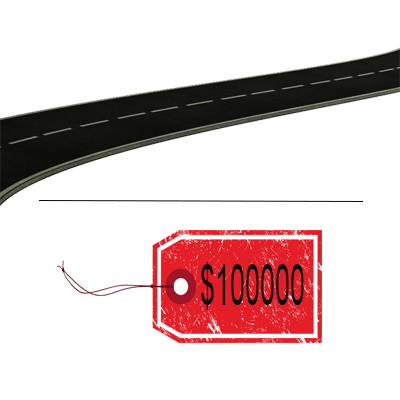
<style>
.page{position:relative;width:400px;height:400px;background:#ffffff}
.page>*{position:absolute;margin:0}
.t1{font:58.3px "ArialMT";color:#0c0b0b;scale:0.46 1}
</style>
<div class="page">
<p class="t1" style="left:201px;top:262px;width:103px;height:48px">$100000</p>
</div>
